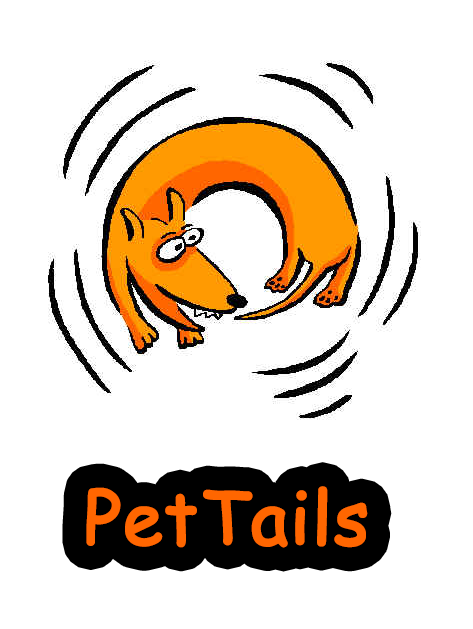
<style>
.page{position:relative;width:473px;height:629px;background:#ffffff}
.page>*{position:absolute;margin:0}
.t1{font:72px "ComicSansMS";color:#ff6600;font-weight:bold}
</style>
<div class="page">
<p class="t1" style="left:86px;top:486px;width:282px;height:62px">PetTails</p>
</div>
